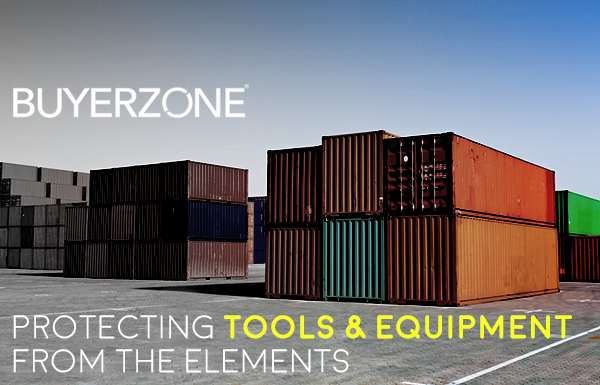
<style>
.page{position:relative;width:600px;height:385px}
.page>*{position:absolute;margin:0}
.t1{font:33.2px/34.1px "Moon-Bold";color:#f6fe24}
.t2{font:33.2px/34.1px "Moon-Light";color:#ffffff}
</style>
<div class="page">
<p class="t1" style="left:13px;top:315px;width:559px;height:58px"><span class="t2">Protecting </span>Tools &amp; Equipment <span class="t2">From the Elements</span></p>
</div>
